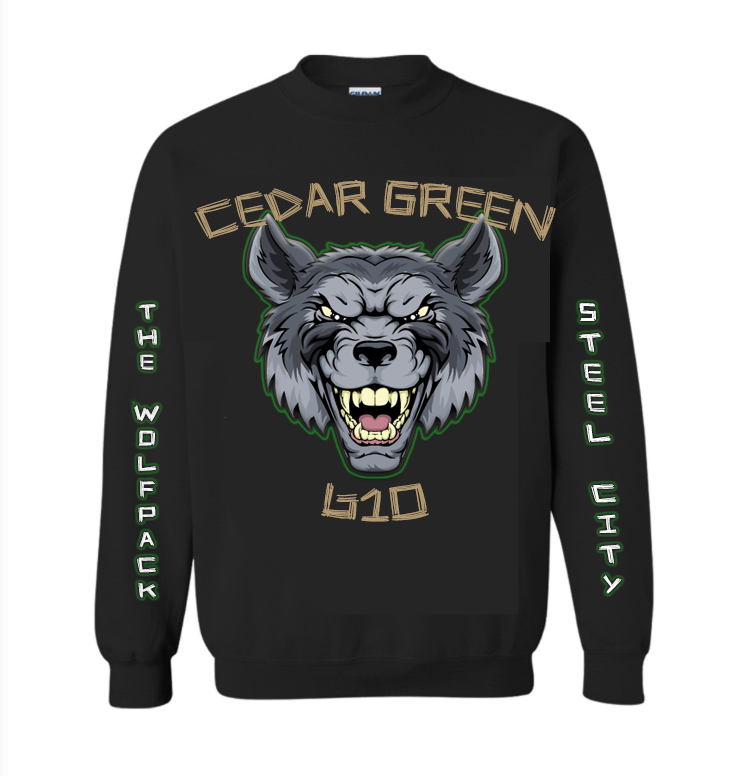
<style>
.page{position:relative;width:749px;height:776px;background:#ffffff}
.page>*{position:absolute;margin:0}
.t1{font:48px "StickFour";color:#b29971}
.t2{font:21.1px "StickFour";color:#f4f4f4;scale:1.18 1}
.t3{font:25.3px "StickFour";color:#ffffff;scale:1.24 1}
</style>
<div class="page">
<p class="t1" style="left:194px;top:180px;width:362px;height:61px">Cedar Green</p>
<p class="t2" style="left:133px;top:303px;width:27px;height:295px;text-align:center">T<br>h<br>e<br><br>W<br>o<br>l<br>f<br>p<br>a<br>c<br>k</p>
<p class="t3" style="left:579px;top:303px;width:43px;height:291px;text-align:center">S<br>t<br>e<br>e<br>l<br><br>C<br>i<br>t<br>y</p>
<p class="t1" style="left:321px;top:482px;width:108px;height:40px">610</p>
</div>
